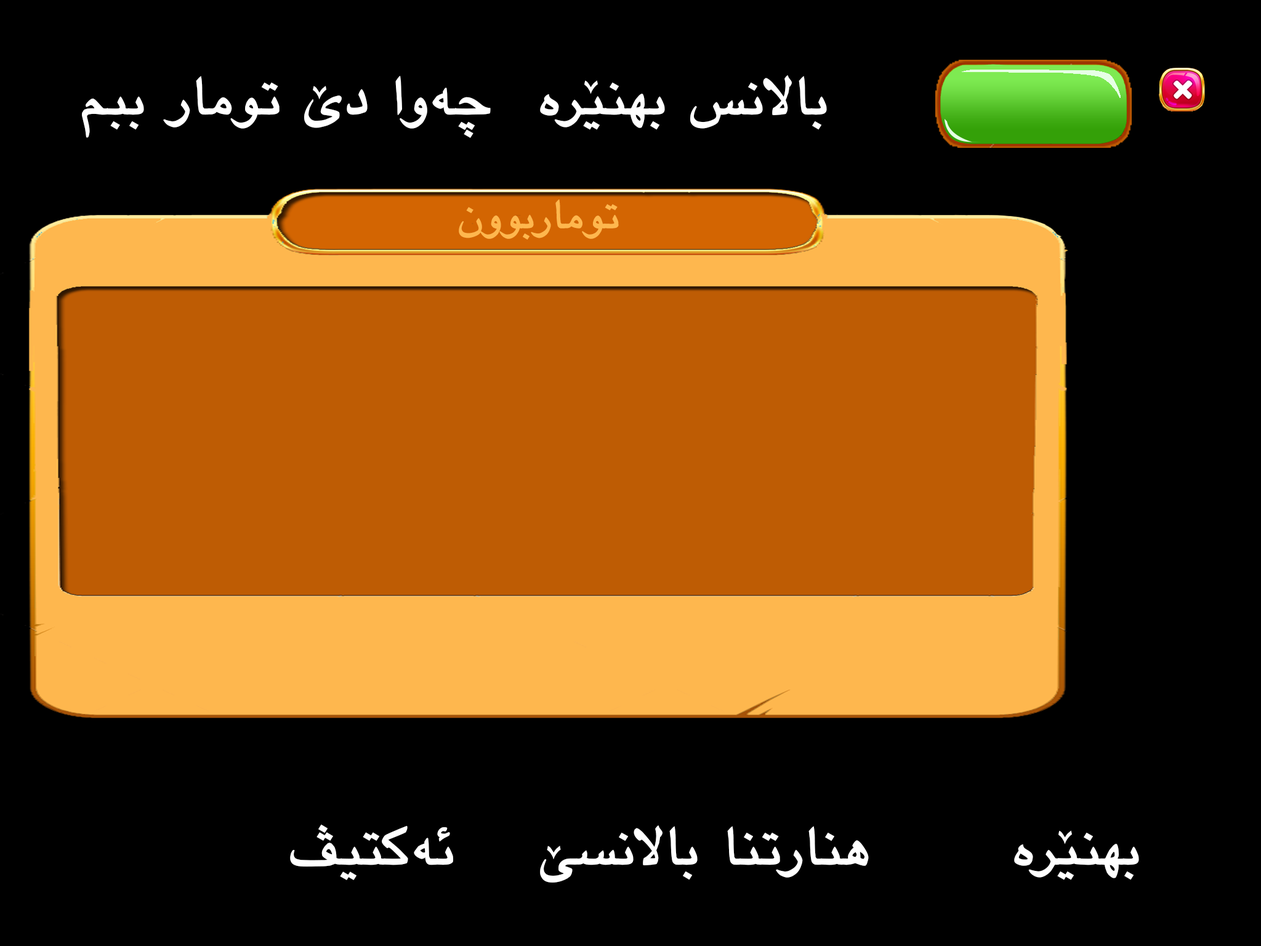
<style>
.page{position:relative;width:1261px;height:946px;background:#000000}
.page>*{position:absolute;margin:0}
.t1{font:75.7px "Unikuxan";color:#ffffff}
.t2{font:57.3px "Unikuxan";color:#feb74e}
</style>
<div class="page">
<p class="t1" style="left:81px;top:76px;width:410px;height:62px">چەوا دێ تومار ببم</p>
<p class="t1" style="left:540px;top:75px;width:287px;height:55px">بالانس بهنێرە</p>
<p class="t2" style="left:459px;top:199px;width:160px;height:41px">توماربوون</p>
<p class="t1" style="left:290px;top:824px;width:163px;height:56px">ئەکتیڤ کرن</p>
<p class="t1" style="left:540px;top:825px;width:329px;height:57px">هنارتنا بالانسێ</p>
<p class="t1" style="left:1014px;top:830px;width:125px;height:50px">بهنێرە</p>
</div>
